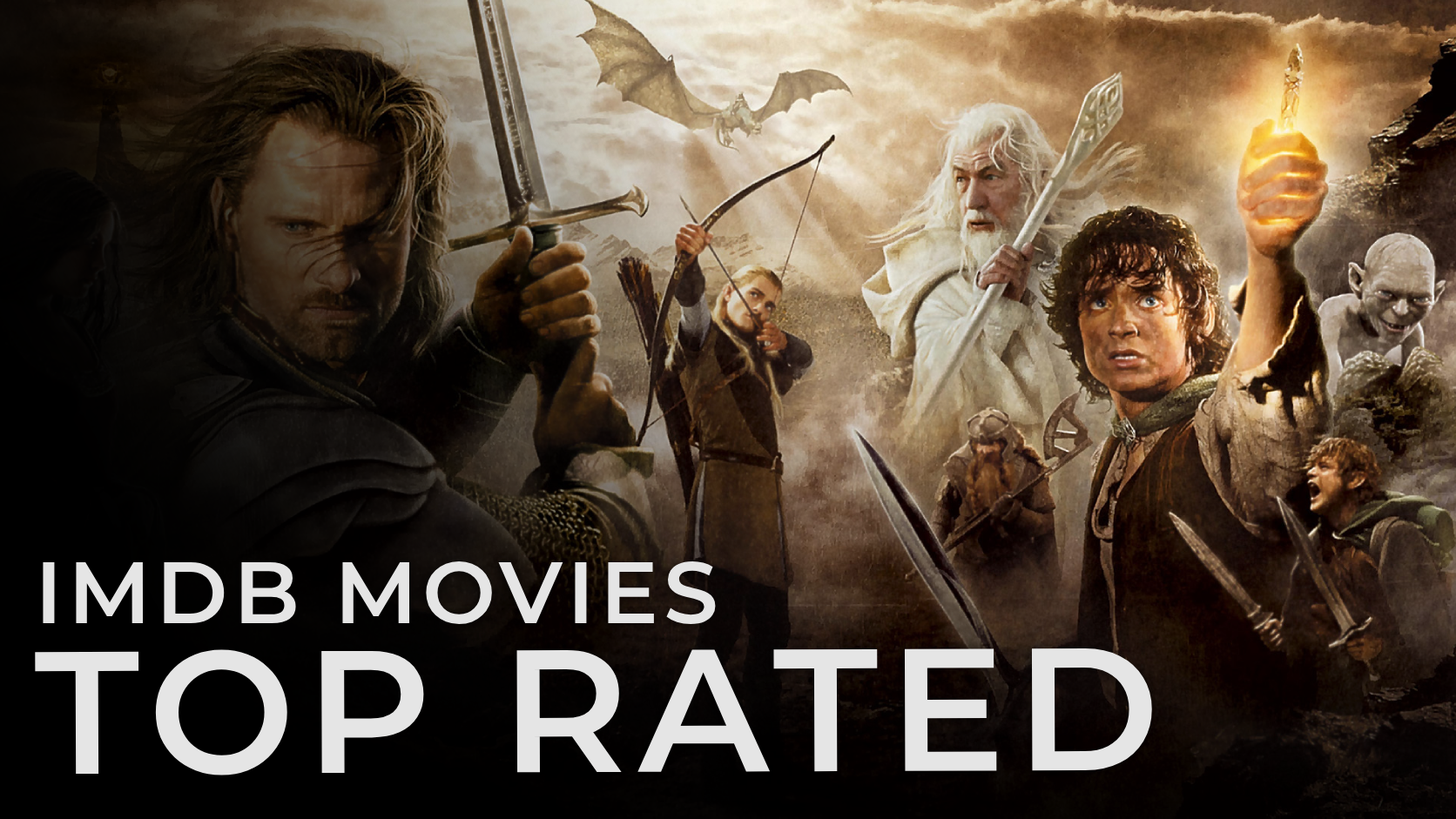
<style>
.page{position:relative;width:1456px;height:819px}
.page>*{position:absolute;margin:0}
.t1{font:87.1px "Montserrat-SemiBold";letter-spacing:0.06em;color:#e5e5e5}
.t2{font:174.1px "Montserrat-SemiBold";letter-spacing:0.06em;color:#e5e5e5}
</style>
<div class="page">
<p class="t1" style="left:43px;top:562px;width:673px;height:62px">IMDB MOVIES</p>
<p class="t2" style="left:35px;top:648px;width:1117px;height:128px">TOP RATED</p>
</div>
